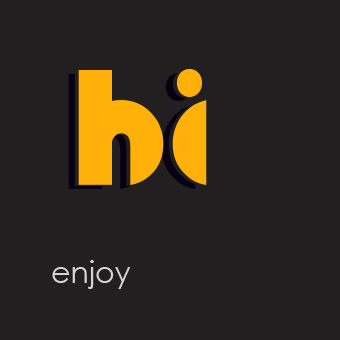
<style>
.page{position:relative;width:340px;height:340px;background:#211f20}
.page>*{position:absolute;margin:0}
.t1{font:120px "Fingerpop";color:#080012}
.t2{font:120px "Fingerpop";color:#211f20}
.t3{font:120px "Fingerpop";color:#ffb10a}
.t4{font:30px "CenturyGothic";color:#d3d3d5}
</style>
<div class="page">
<p class="t1" style="left:68px;top:73px;width:128px;height:116px">hi</p>
<p class="t2" style="left:74px;top:70px;width:129px;height:116px">hi</p>
<p class="t3" style="left:78px;top:69px;width:129px;height:116px">hi</p>
<p class="t4" style="left:52px;top:260px;width:79px;height:29px">enjoy</p>
</div>
